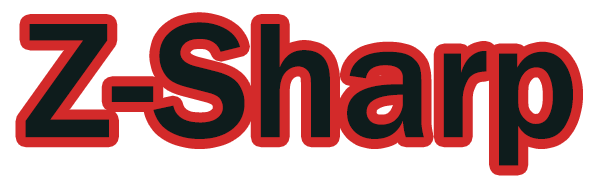
<style>
.page{position:relative;width:600px;height:188px;background:#ffffff}
.page>*{position:absolute;margin:0}
.t1{font:169.5px "FranklinGothic-Medium";color:#0e1c1c}
</style>
<div class="page">
<p class="t1" style="left:25px;top:22px;width:548px;height:144px">Z-Sharp</p>
</div>
